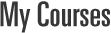
<style>
.page{position:relative;width:111px;height:33px;background:#ffffff}
.page>*{position:absolute;margin:0}
.t1{font:34.5px "UniversLTStd-UltraCn";color:#363636}
</style>
<div class="page">
<p class="t1" style="left:0px;top:1px;width:110px;height:32px">My Courses</p>
</div>
